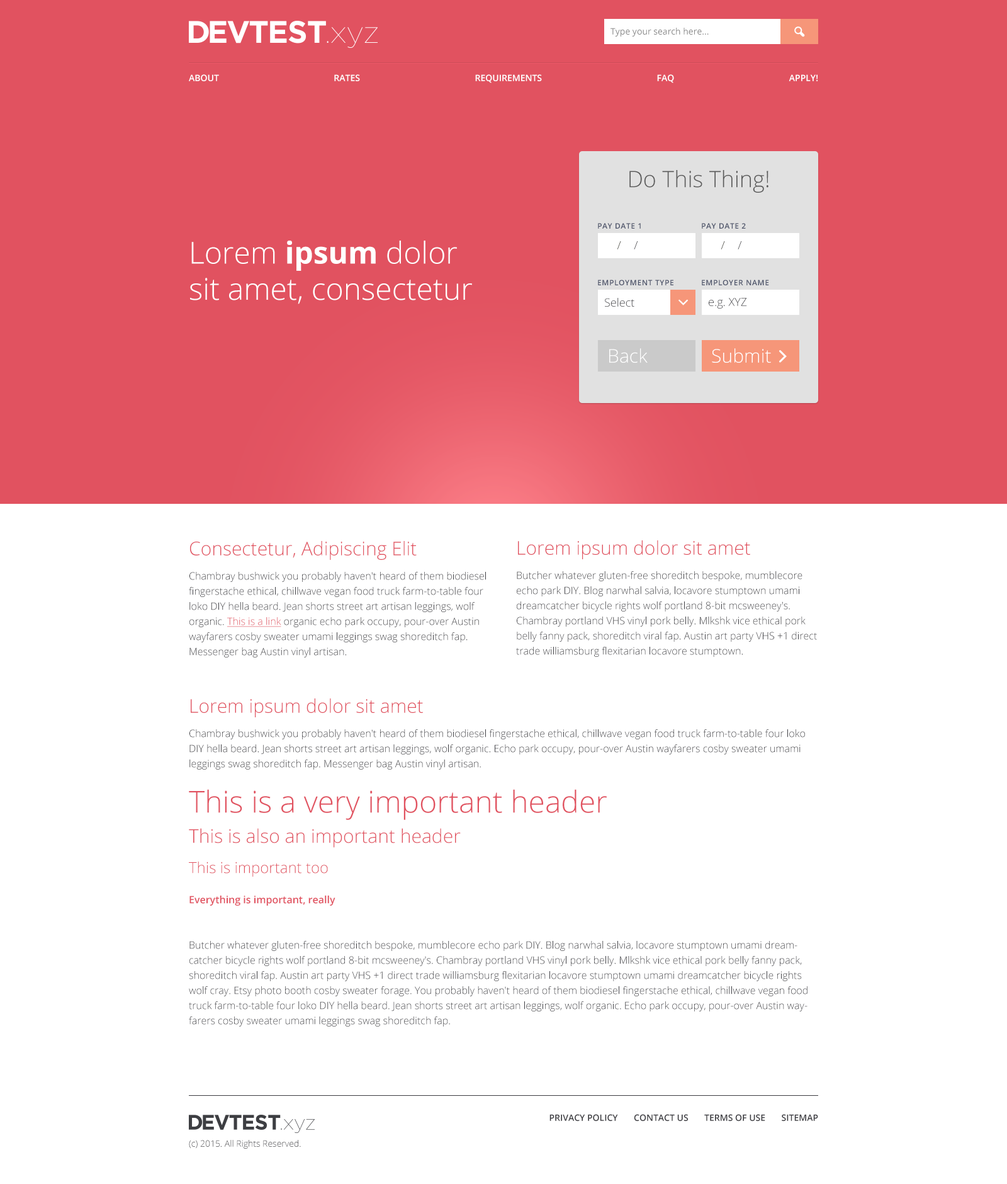
<style>
.page{position:relative;width:1007px;height:1184px;background:#ffffff}
.page>*{position:absolute;margin:0}
.t1{font:8.8px "OpenSans";color:#898989}
.t2{font:11.3px "devtestxyz";color:#ffffff}
.t3{font:8.8px "OpenSans-Semibold";color:#ffffff;text-transform:uppercase}
.t4{font:22.7px "OpenSans-Light";color:#5a5a5a}
.t5{font:7.6px "OpenSans-Semibold";letter-spacing:0.05em;color:#4c536a;text-transform:uppercase}
.t6{font:30.2px "OpenSans-Light";color:#ffffff}
.t7{font:30.2px "OpenSans-Bold";color:#ffffff}
.t8{font:11.3px "OpenSans-Light"}
.t9{font:11.3px "OpenSans-Light";color:#3d3d42}
.t10{font:18.8px "OpenSans-Light";color:#ffffff}
.t11{font:15px "devtestxyz";letter-spacing:0.1em;color:#ffffff;text-transform:uppercase}
.t12{font:18.9px "OpenSans-Light";color:#e15260}
.t13{font:10.1px/15.1px "OpenSans-Light";color:#3d3d42}
.t14{font:10.1px/15.1px "OpenSans-Light";color:#e15260;text-decoration:underline}
.t15{font:30.2px/15.1px "OpenSans-Light";color:#e15260}
.t16{font:18.9px/15.1px "OpenSans-Light";color:#e15260}
.t17{font:15.1px/15.1px "OpenSans-Light";color:#e15260}
.t18{font:10.1px/15.1px "OpenSans-Semibold";color:#e15260}
.t19{font:8.8px "OpenSans-Semibold";color:#3d3d42;text-transform:uppercase}
.t20{font:8.8px "OpenSans-Light";color:#3d3d42}
</style>
<div class="page">
<p class="t1" style="left:611px;top:28px;width:98px;height:9px">Type your search here...</p>
<p class="t2" style="left:795px;top:26px;width:10px;height:11px">2</p>
<p class="t3" style="left:189px;top:74px;width:630px;height:9px">About Rates Requirements FAQ Apply!</p>
<p class="t4" style="left:630px;top:170px;width:139px;height:23px">Do This Thing!</p>
<p class="t5" style="left:598px;top:223px;width:43px;height:6px">Pay Date 1</p>
<p class="t5" style="left:702px;top:223px;width:44px;height:6px">Pay Date 2</p>
<p class="t6" style="left:190px;top:241px;width:282px;height:63px">Lorem <span class="t7">ipsum</span> dolor sit amet, consectetur</p>
<p class="t5" style="left:598px;top:280px;width:76px;height:5px">Employment Type</p>
<p class="t5" style="left:702px;top:280px;width:67px;height:5px">Employer Name</p>
<p class="t8" style="left:605px;top:298px;width:30px;height:9px">Select</p>
<p class="t2" style="left:679px;top:299px;width:9px;height:6px">6</p>
<p class="t9" style="left:709px;top:298px;width:38px;height:11px">e.g. XYZ</p>
<p class="t10" style="left:609px;top:348px;width:39px;height:15px">Back</p>
<p class="t10" style="left:712px;top:348px;width:59px;height:15px">Submit</p>
<p class="t11" style="left:779px;top:350px;width:8px;height:13px">1</p>
<p class="t12" style="left:190px;top:541px;width:227px;height:19px">Consectetur, Adipiscing Elit</p>
<p class="t12" style="left:518px;top:540px;width:233px;height:19px">Lorem ipsum dolor sit amet</p>
<p class="t13" style="left:189px;top:572px;width:297px;height:85px">Chambray bushwick you probably haven't heard of them biodiesel fingerstache ethical, chillwave vegan food truck farm-to-table four loko DIY hella beard. Jean shorts street art artisan leggings, wolf organic. <span class="t14">This is a link</span> organic echo park occupy, pour-over Austin wayfarers cosby sweater umami leggings swag shoreditch fap. Messenger bag Austin vinyl artisan.</p>
<p class="t13" style="left:516px;top:571px;width:301px;height:86px">Butcher whatever gluten-free shoreditch bespoke, mumblecore echo park DIY. Blog narwhal salvia, locavore stumptown umami dreamcatcher bicycle rights wolf portland 8-bit mcsweeney's. Chambray portland VHS vinyl pork belly. Mlkshk vice ethical pork belly fanny pack, shoreditch viral fap. Austin art party VHS +1 direct trade williamsburg flexitarian locavore stumptown.</p>
<p class="t12" style="left:191px;top:698px;width:232px;height:19px">Lorem ipsum dolor sit amet</p>
<p class="t13" style="left:189px;top:729px;width:619px;height:297px">Chambray bushwick you probably haven't heard of them biodiesel fingerstache ethical, chillwave vegan food truck farm-to-table four loko DIY hella beard. Jean shorts street art artisan leggings, wolf organic. Echo park occupy, pour-over Austin wayfarers cosby sweater umami leggings swag shoreditch fap. Messenger bag Austin vinyl artisan. <br><br><br><span class="t15">This is a very important header<br><br></span><span class="t16">This is also an important header<br><br></span><span class="t17">This is important too<br><br></span><span class="t18">Everything is important, really<br><br></span><br>Butcher whatever gluten-free shoreditch bespoke, mumblecore echo park DIY. Blog narwhal salvia, locavore stumptown umami dreamcatcher bicycle rights wolf portland 8-bit mcsweeney's. Chambray portland VHS vinyl pork belly. Mlkshk vice ethical pork belly fanny pack, shoreditch viral fap. Austin art party VHS +1 direct trade williamsburg flexitarian locavore stumptown umami dreamcatcher bicycle rights wolf cray. Etsy photo booth cosby sweater forage. You probably haven't heard of them biodiesel fingerstache ethical, chillwave vegan food truck farm-to-table four loko DIY hella beard. Jean shorts street art artisan leggings, wolf organic. Echo park occupy, pour-over Austin wayfarers cosby sweater umami leggings swag shoreditch fap.</p>
<p class="t19" style="left:550px;top:1114px;width:269px;height:7px">Privacy Policy       Contact Us       Terms Of Use       Sitemap</p>
<p class="t20" style="left:189px;top:1140px;width:112px;height:8px">(c) 2015. All Rights Reserved.</p>
</div>
